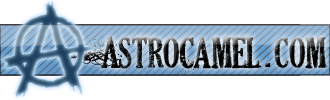
<style>
.page{position:relative;width:330px;height:100px;background:#ffffff}
.page>*{position:absolute;margin:0}
.t1{font:38px "DEAD-SECRETARY"}
.t2{font:48px "ArialMT";color:#000000}
</style>
<div class="page">
<p class="t1" style="left:50px;top:35px;width:278px;height:40px">AstroCamel. com</p>
<p class="t2" style="left:265px;top:63px;width:6px;height:4px">.</p>
</div>
